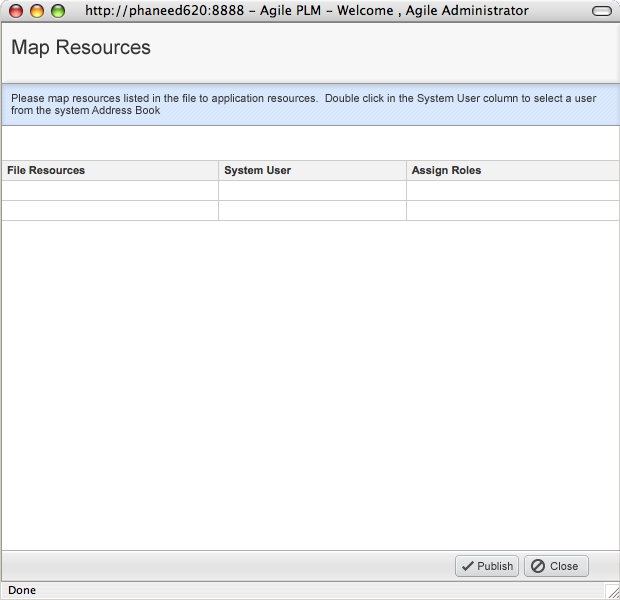
<style>
.page{position:relative;width:620px;height:600px;background:#ffffff}
.page>*{position:absolute;margin:0}
.t1{font:20px "ArialMT";color:#333333}
.t2{font:11px/12px "ArialMT";color:#333333}
.t3{font:11px "ArialMT";color:#333333}
</style>
<div class="page">
<p class="t1" style="left:12px;top:39px;width:139px;height:19px">Map Resources</p>
<p class="t2" style="left:11px;top:94px;width:586px;height:23px">Please map resources listed in the file to application resources.  Double click in the System User column to select a user<br>from the system Address Book</p>
<p class="t3" style="left:478px;top:562px;width:35px;height:8px">Publish</p>
<p class="t3" style="left:550px;top:562px;width:28px;height:8px">Close</p>
</div>
